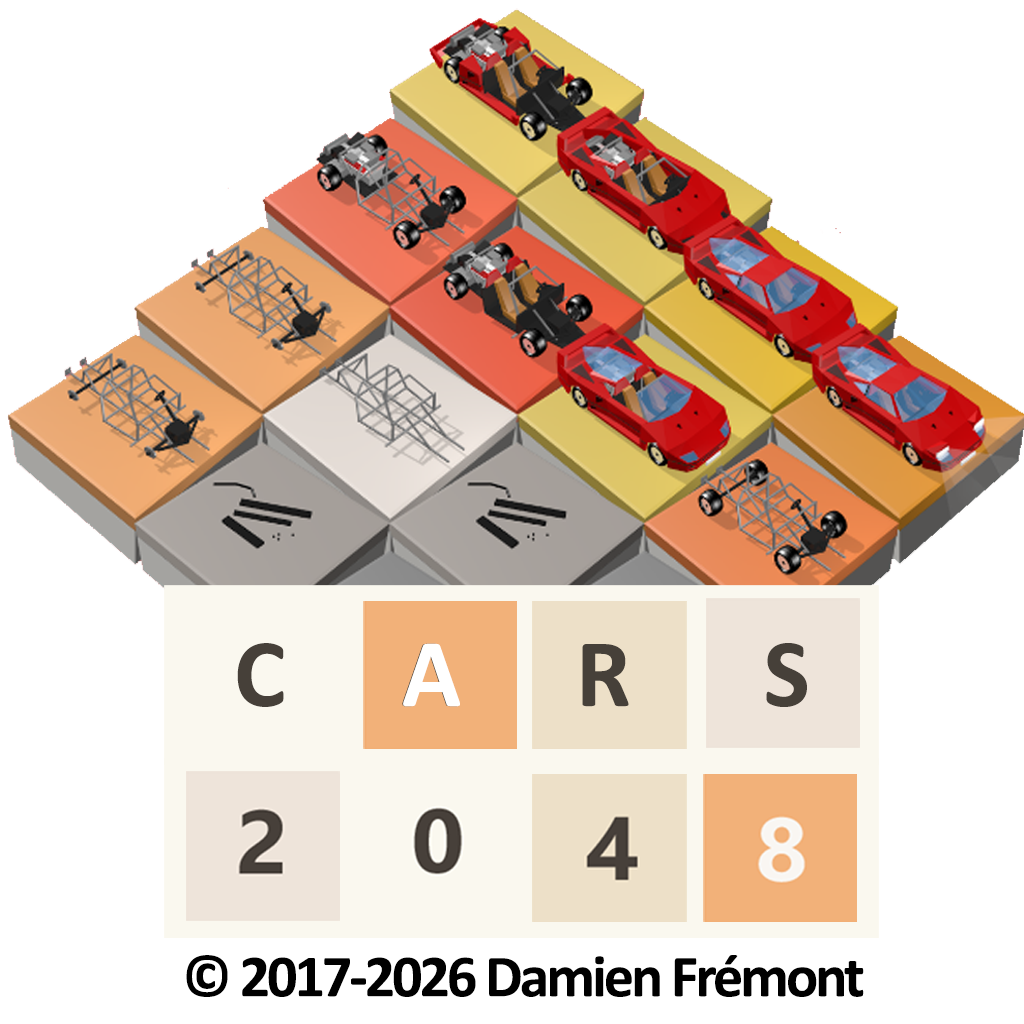
<style>
.page{position:relative;width:1024px;height:1024px;background:#ffffff}
.page>*{position:absolute;margin:0}
.t1{font:97.7px "Calibri-Bold";letter-spacing:-0.05em;color:#464039}
.t2{font:97.7px "Calibri-Bold";letter-spacing:-0.05em;color:#ffffff}
.t3{font:60px "Calibri-Bold";letter-spacing:-0.05em;color:#000000}
</style>
<div class="page">
<p class="t1" style="left:237px;top:643px;width:570px;height:64px">C       A       R        S</p>
<p class="t2" style="left:403px;top:643px;width:57px;height:64px">A</p>
<p class="t3" style="left:186px;top:955px;width:678px;height:42px">© 2017-2026 Damien Frémont</p>
</div>
